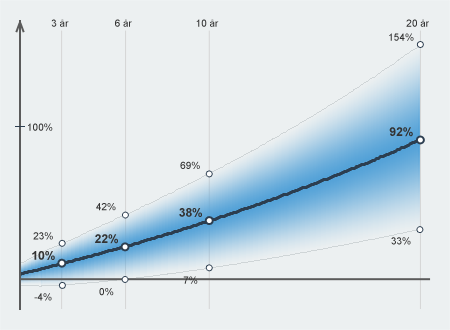
<style>
.page{position:relative;width:450px;height:330px;background:#ecf0f1}
.page>*{position:absolute;margin:0}
.t1{font:10px "ArialMT";color:#333333}
.t2{font:12px "Arial-BoldMT";color:#333333}
</style>
<div class="page">
<p class="t1" style="left:51px;top:19px;width:18px;height:8px">3 år</p>
<p class="t1" style="left:115px;top:19px;width:17px;height:8px">6 år</p>
<p class="t1" style="left:196px;top:19px;width:23px;height:8px">10 år</p>
<p class="t1" style="left:406px;top:19px;width:23px;height:8px">20 år</p>
<p class="t1" style="left:389px;top:33px;width:25px;height:8px">154%</p>
<p class="t1" style="left:28px;top:123px;width:25px;height:8px">100%</p>
<p class="t2" style="left:389px;top:127px;width:24px;height:10px">92%</p>
<p class="t1" style="left:180px;top:161px;width:20px;height:8px">69%</p>
<p class="t1" style="left:96px;top:203px;width:20px;height:8px">42%</p>
<p class="t2" style="left:179px;top:208px;width:23px;height:9px">38%</p>
<p class="t1" style="left:33px;top:232px;width:20px;height:8px">23%</p>
<p class="t2" style="left:95px;top:234px;width:23px;height:10px">22%</p>
<p class="t1" style="left:391px;top:237px;width:20px;height:8px">33%</p>
<p class="t2" style="left:32px;top:251px;width:23px;height:9px">10%</p>
<p class="t1" style="left:183px;top:276px;width:15px;height:8px">7%</p>
<p class="t1" style="left:34px;top:293px;width:18px;height:8px">-4%</p>
<p class="t1" style="left:99px;top:288px;width:15px;height:8px">0%</p>
</div>
